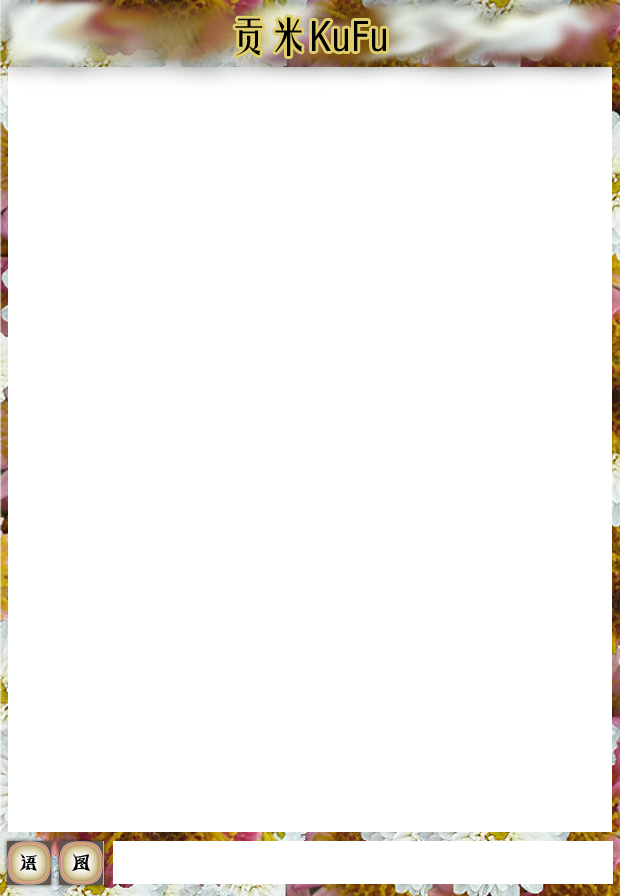
<style>
.page{position:relative;width:620px;height:896px;background:#ffffff}
.page>*{position:absolute;margin:0}
.t1{font:39.9px "FZYTK--GBK1-0";color:#000000}
.t2{font:21.5px "HYk5gj";color:#000000}
</style>
<div class="page">
<p class="t1" style="left:235px;top:17px;width:151px;height:39px">贡米KuFu</p>
<p class="t2" style="left:20px;top:854px;width:17px;height:17px">语</p>
<p class="t2" style="left:71px;top:854px;width:19px;height:18px">图</p>
</div>
